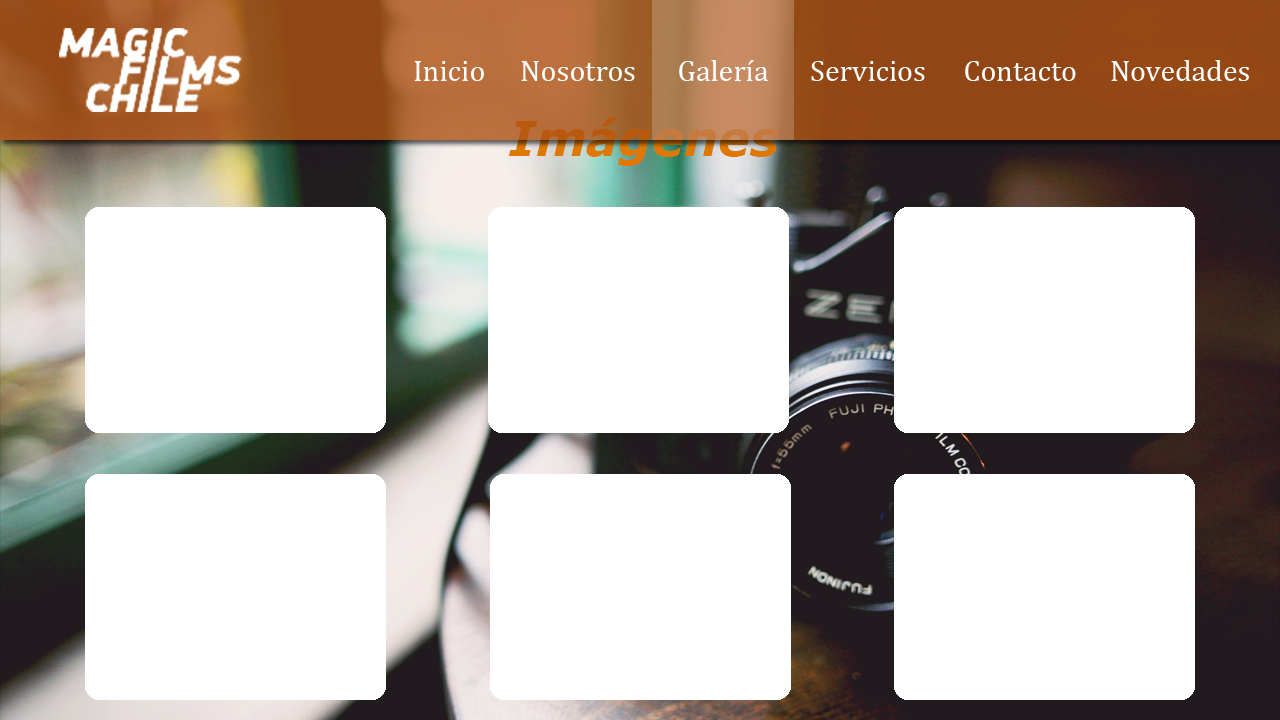
<style>
.page{position:relative;width:1280px;height:720px;background:#ffffff}
.page>*{position:absolute;margin:0}
.t1{font:30px "Cambria";color:#ffffff}
.t2{font:48px "Verdana-BoldItalic"}
</style>
<div class="page">
<p class="t1" style="left:414px;top:61px;width:70px;height:20px">Inicio</p>
<p class="t1" style="left:521px;top:61px;width:114px;height:20px">Nosotros</p>
<p class="t1" style="left:679px;top:60px;width:89px;height:21px">Galería</p>
<p class="t1" style="left:811px;top:61px;width:114px;height:20px">Servicios</p>
<p class="t1" style="left:965px;top:61px;width:111px;height:20px">Contacto</p>
<p class="t1" style="left:1111px;top:60px;width:138px;height:21px">Novedades</p>
<p class="t2" style="left:508px;top:117px;width:271px;height:49px">Imágenes</p>
</div>
